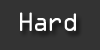
<style>
.page{position:relative;width:100px;height:50px;background:#333333}
.page>*{position:absolute;margin:0}
.t1{font:23.9px "OCRAStd";letter-spacing:-0.1em;color:#ffffff}
</style>
<div class="page">
<p class="t1" style="left:20px;top:12px;width:56px;height:19px">Hard</p>
</div>
